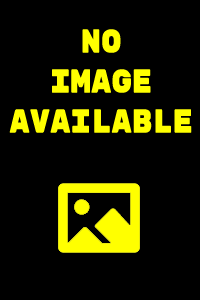
<style>
.page{position:relative;width:200px;height:300px;background:#000000}
.page>*{position:absolute;margin:0}
.t1{font:33.3px "RubikMonoOne-Regular";color:#ffff00;scale:0.72 1}
</style>
<div class="page">
<p class="t1" style="left:9px;top:29px;width:183px;height:104px;text-align:center">No<br>Image<br>AVAILABLE</p>
</div>
